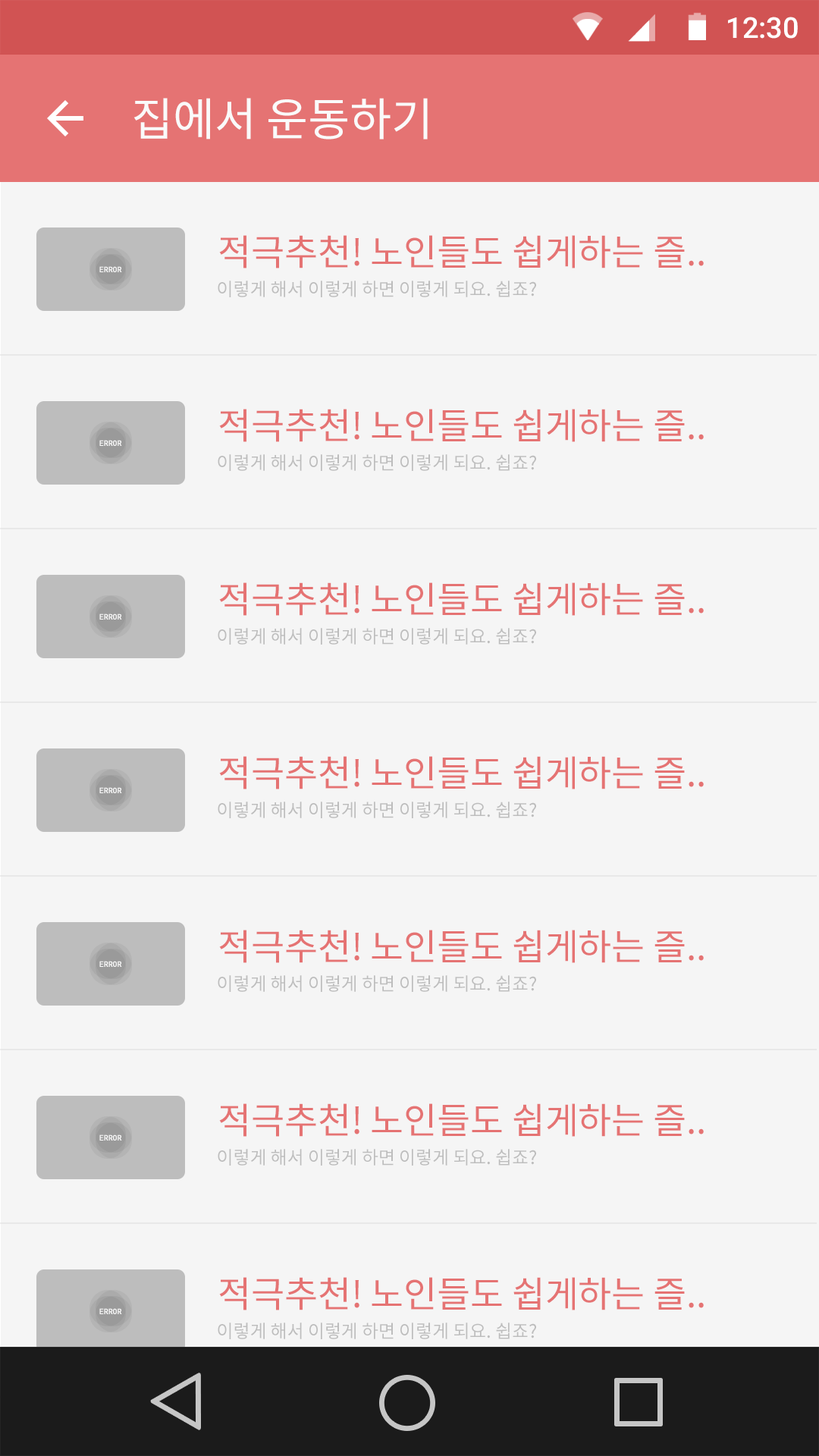
<style>
.page{position:relative;width:819px;height:1456px;background:#f5f5f5}
.page>*{position:absolute;margin:0}
.t1{font:28.8px "Roboto-Medium";color:#ffffff}
.t2{font:45.5px "NotoSansCJKkr-Regular";letter-spacing:-0.005em;color:#fafafa}
.t3{font:36.4px "NotoSansCJKkr-Regular";letter-spacing:-0.005em;color:#e57373}
.t4{font:7.6px "RobotoMono-Bold";letter-spacing:-0.005em;color:#fafafa}
.t5{font:18.2px "NotoSansCJKkr-Regular";letter-spacing:-0.005em;color:#bdbdbd}
</style>
<div class="page">
<p class="t1" style="left:728px;top:17px;width:70px;height:22px">12:30</p>
<p class="t2" style="left:133px;top:98px;width:295px;height:42px">집에서 운동하기</p>
<p class="t3" style="left:219px;top:235px;width:485px;height:33px">적극추천! 노인들도 쉽게하는 즐..</p>
<p class="t4" style="left:99px;top:266px;width:23px;height:6px">ERROR</p>
<p class="t5" style="left:218px;top:281px;width:318px;height:16px">이렇게 해서 이렇게 하면 이렇게 되요. 쉽죠?</p>
<p class="t3" style="left:219px;top:409px;width:485px;height:33px">적극추천! 노인들도 쉽게하는 즐..</p>
<p class="t4" style="left:99px;top:440px;width:23px;height:6px">ERROR</p>
<p class="t5" style="left:218px;top:454px;width:318px;height:17px">이렇게 해서 이렇게 하면 이렇게 되요. 쉽죠?</p>
<p class="t3" style="left:219px;top:582px;width:485px;height:34px">적극추천! 노인들도 쉽게하는 즐..</p>
<p class="t4" style="left:99px;top:613px;width:23px;height:7px">ERROR</p>
<p class="t5" style="left:218px;top:628px;width:318px;height:17px">이렇게 해서 이렇게 하면 이렇게 되요. 쉽죠?</p>
<p class="t3" style="left:219px;top:756px;width:485px;height:33px">적극추천! 노인들도 쉽게하는 즐..</p>
<p class="t4" style="left:99px;top:787px;width:23px;height:6px">ERROR</p>
<p class="t5" style="left:218px;top:802px;width:318px;height:16px">이렇게 해서 이렇게 하면 이렇게 되요. 쉽죠?</p>
<p class="t3" style="left:219px;top:930px;width:485px;height:33px">적극추천! 노인들도 쉽게하는 즐..</p>
<p class="t4" style="left:99px;top:961px;width:23px;height:6px">ERROR</p>
<p class="t5" style="left:218px;top:975px;width:318px;height:17px">이렇게 해서 이렇게 하면 이렇게 되요. 쉽죠?</p>
<p class="t3" style="left:219px;top:1103px;width:485px;height:34px">적극추천! 노인들도 쉽게하는 즐..</p>
<p class="t4" style="left:99px;top:1134px;width:23px;height:7px">ERROR</p>
<p class="t5" style="left:218px;top:1149px;width:318px;height:17px">이렇게 해서 이렇게 하면 이렇게 되요. 쉽죠?</p>
<p class="t3" style="left:219px;top:1277px;width:485px;height:33px">적극추천! 노인들도 쉽게하는 즐..</p>
<p class="t4" style="left:99px;top:1308px;width:23px;height:6px">ERROR</p>
<p class="t5" style="left:218px;top:1323px;width:318px;height:16px">이렇게 해서 이렇게 하면 이렇게 되요. 쉽죠?</p>
</div>
